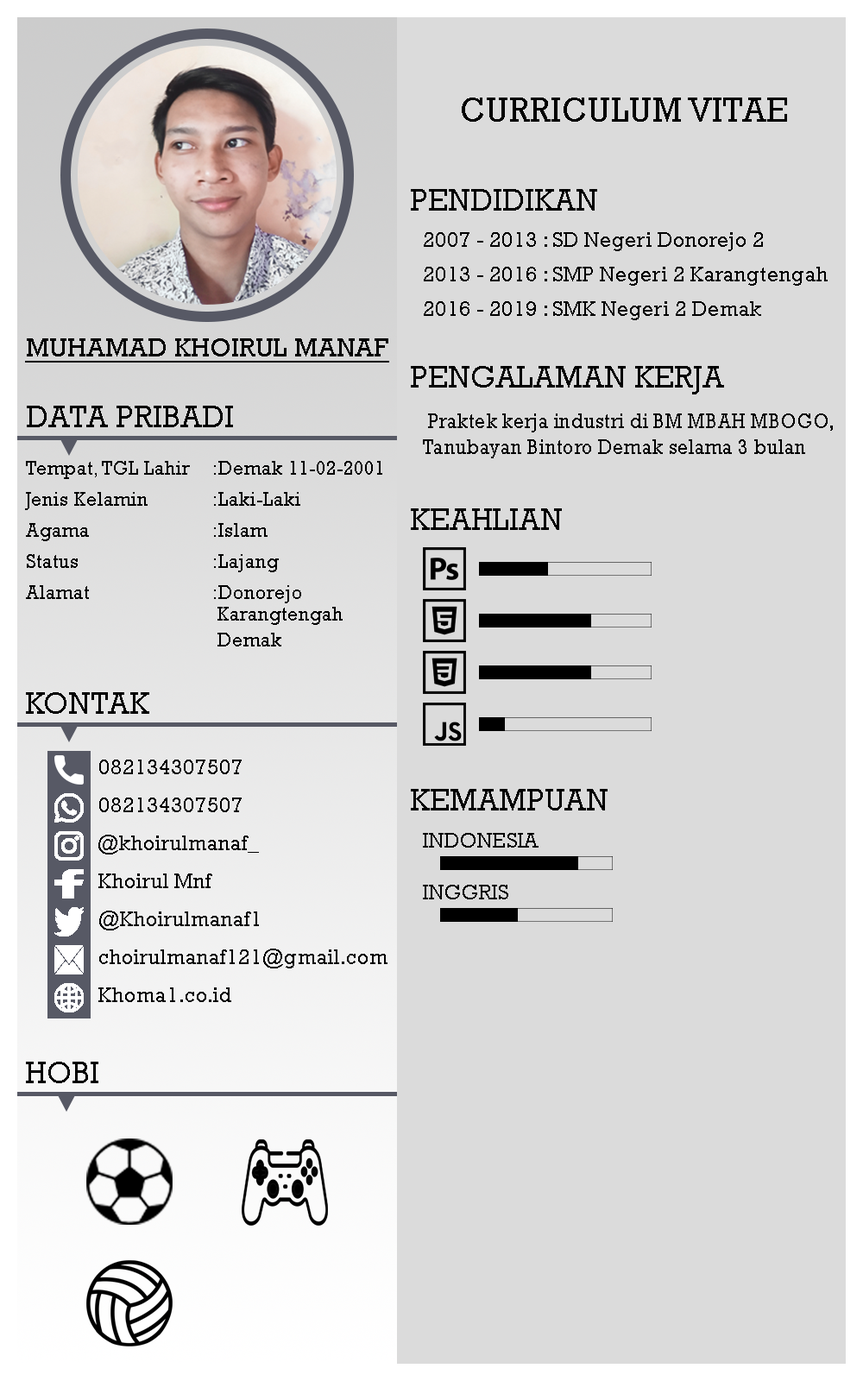
<style>
.page{position:relative;width:863px;height:1381px;background:#dbdbdb}
.page>*{position:absolute;margin:0}
.t1{font:34.5px "Rockwell";color:#000000}
.t2{font:31.1px "Rockwell";color:#000000}
.t3{font:21.6px "Rockwell";color:#000000}
.t4{font:26.8px "Rockwell";color:#000000;text-decoration:underline}
.t5{font:21.6px "Rockwell";color:#000000;scale:0.94 1}
.t6{font:19.9px/15.5px "Rockwell";color:#000000}
.t7{font:19.9px/21.6px "Rockwell";color:#000000}
</style>
<div class="page">
<p class="t1" style="left:462px;top:98px;width:325px;height:24px">CURRICULUM VITAE</p>
<p class="t2" style="left:411px;top:189px;width:186px;height:22px">PENDIDIKAN</p>
<p class="t3" style="left:424px;top:232px;width:339px;height:19px">2007 - 2013 : SD Negeri Donorejo 2</p>
<p class="t3" style="left:424px;top:267px;width:404px;height:19px">2013 - 2016 : SMP Negeri 2 Karangtengah</p>
<p class="t3" style="left:424px;top:301px;width:337px;height:19px">2016 - 2019 : SMK Negeri 2 Demak</p>
<p class="t4" style="left:25px;top:338px;width:364px;height:25px">MUHAMAD KHOIRUL MANAF</p>
<p class="t2" style="left:411px;top:366px;width:313px;height:29px">PENGALAMAN KERJA</p>
<p class="t2" style="left:27px;top:406px;width:206px;height:21px">DATA PRIBADI</p>
<p class="t5" style="left:423px;top:414px;width:410px;height:44px">Praktek kerja industri di BM MBAH MBOGO, Tanubayan Bintoro Demak selama 3 bulan</p>
<p class="t6" style="left:25px;top:461px;width:357px;height:186px">Tempat, TGL Lahir :Demak 11-02-2001<br><br>Jenis Kelamin   :Laki-Laki<br><br>Agama    :Islam<br><br>Status     :Lajang<br><br>Alamat    :Donorejo <br>       <span class="t7">Karangtengah <br>        Demak</span></p>
<p class="t2" style="left:411px;top:508px;width:151px;height:22px">KEAHLIAN</p>
<p class="t2" style="left:26px;top:692px;width:123px;height:22px">KONTAK</p>
<p class="t3" style="left:99px;top:760px;width:143px;height:14px">082134307507</p>
<p class="t3" style="left:99px;top:798px;width:143px;height:14px">082134307507</p>
<p class="t2" style="left:411px;top:789px;width:197px;height:22px">KEMAMPUAN</p>
<p class="t3" style="left:423px;top:833px;width:116px;height:15px">INDONESIA</p>
<p class="t3" style="left:98px;top:835px;width:161px;height:20px">@khoirulmanaf_</p>
<p class="t3" style="left:98px;top:874px;width:114px;height:14px">Khoirul Mnf</p>
<p class="t3" style="left:423px;top:885px;width:85px;height:15px">INGGRIS</p>
<p class="t3" style="left:99px;top:911px;width:160px;height:20px">@Khoirulmanaf1</p>
<p class="t3" style="left:99px;top:949px;width:289px;height:20px">choirulmanaf121@gmail.com</p>
<p class="t3" style="left:98px;top:988px;width:133px;height:14px">Khoma1.co.id</p>
<p class="t2" style="left:26px;top:1062px;width:72px;height:21px">HOBI</p>
</div>
